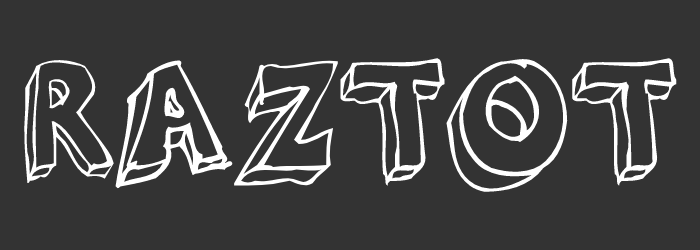
<style>
.page{position:relative;width:700px;height:250px;background:#333333}
.page>*{position:absolute;margin:0}
.t1{font:152px "3dumb";color:#ffffff}
</style>
<div class="page">
<p class="t1" style="left:23px;top:58px;width:654px;height:134px">RAZTOT</p>
</div>
